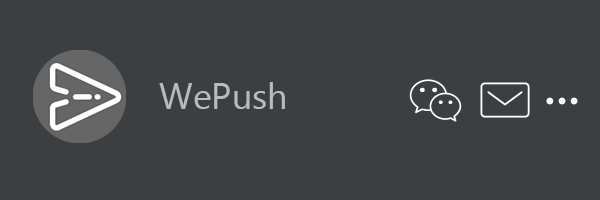
<style>
.page{position:relative;width:600px;height:200px;background:#3c3f41}
.page>*{position:absolute;margin:0}
.t1{font:36px "SegoeUI";color:#bbbbbb}
</style>
<div class="page">
<p class="t1" style="left:159px;top:82px;width:126px;height:27px">WePush</p>
</div>
